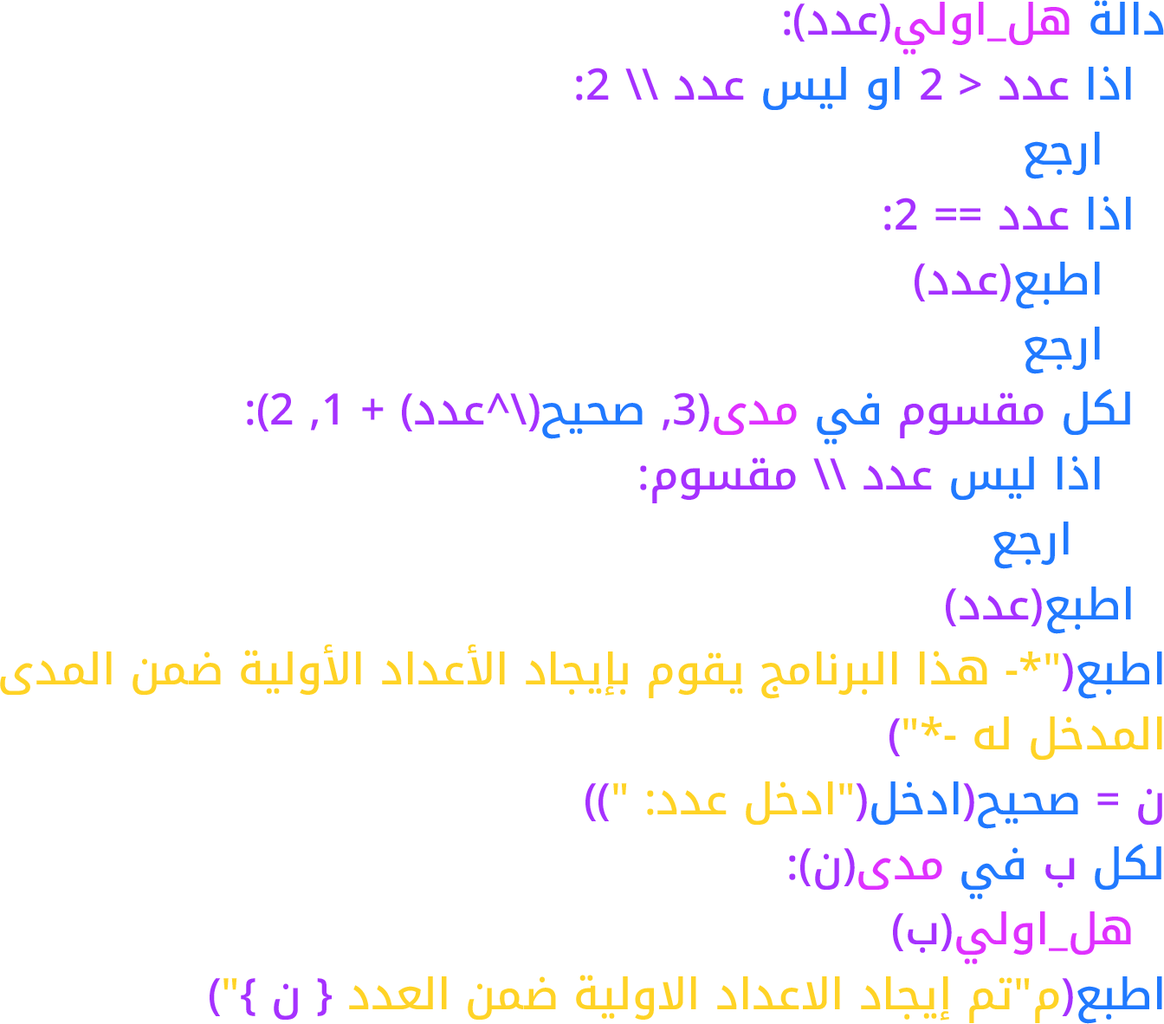
<style>
.page{position:relative;width:1164px;height:1024px;background:#ffffff}
.page>*{position:absolute;margin:0}
.t1{font:43.3px/65px "NotoKufiArabic-Medium";color:#ffd326}
.t2{font:43.3px/65px "NotoKufiArabic-Medium";color:#2079ff}
.t3{font:43.3px/65px "NotoKufiArabic-Medium";color:#df31ff}
.t4{font:43.3px/65px "NotoKufiArabic-Medium";color:#a531ff}
</style>
<div class="page">
<p class="t1" style="left:0px;top:0px;width:1164px;height:1024px"><span class="t2">دالة </span><span class="t3">هل_اولي</span><span class="t4">(عدد):<br> </span><span class="t2">اذا</span><span class="t4"> عدد &lt; 2 </span><span class="t2">او ليس</span><span class="t4"> عدد \\ 2:<br>  </span><span class="t2">ارجع<br> اذا</span><span class="t4"> عدد == 2:<br>  </span><span class="t2">اطبع</span><span class="t4">(عدد)<br>  </span><span class="t2">ارجع<br> لكل</span><span class="t4"> مقسوم </span><span class="t2">في </span><span class="t3">مدى</span><span class="t4">(3, </span><span class="t2">صحيح</span><span class="t4">(\^عدد) + 1, 2):<br>  </span><span class="t2">اذا ليس</span><span class="t4"> عدد \\ مقسوم:<br>   </span><span class="t2">ارجع<br> اطبع</span><span class="t4">(عدد)<br></span><span class="t2">اطبع</span><span class="t4">(</span>"*- هذا البرنامج يقوم بإيجاد الأعداد الأولية ضمن المدى المدخل له -*"<span class="t4">)<br>ن = </span><span class="t2">صحيح</span><span class="t4">(</span><span class="t2">ادخل</span><span class="t4">(</span>"ادخل عدد: "<span class="t4">))<br></span><span class="t2">لكل </span><span class="t4">ب </span><span class="t2">في </span><span class="t3">مدى</span><span class="t4">(ن):<br> </span><span class="t3">هل_اولي</span><span class="t4">(ب)<br></span><span class="t2">اطبع</span><span class="t4">(</span>م"تم إيجاد الاعداد الاولية ضمن العدد <span class="t4">{ ن }</span>"<span class="t4">)</span></p>
</div>
